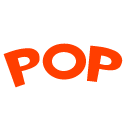
<style>
.page{position:relative;width:128px;height:128px;background:#ffffff}
.page>*{position:absolute;margin:0}
.t1{font:49.3px "TF2Build";color:#ff3e00}
</style>
<div class="page">
<p class="t1" style="left:3px;top:43px;width:120px;height:45px">POP</p>
</div>
